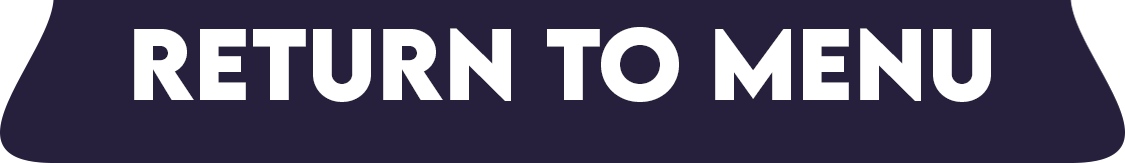
<style>
.page{position:relative;width:1125px;height:163px;background:#26203c}
.page>*{position:absolute;margin:0}
.t1{font:90px "LEMONMILK-Bold";color:#ffffff}
</style>
<div class="page">
<p class="t1" style="left:134px;top:27px;width:857px;height:75px">Return to menu</p>
</div>
